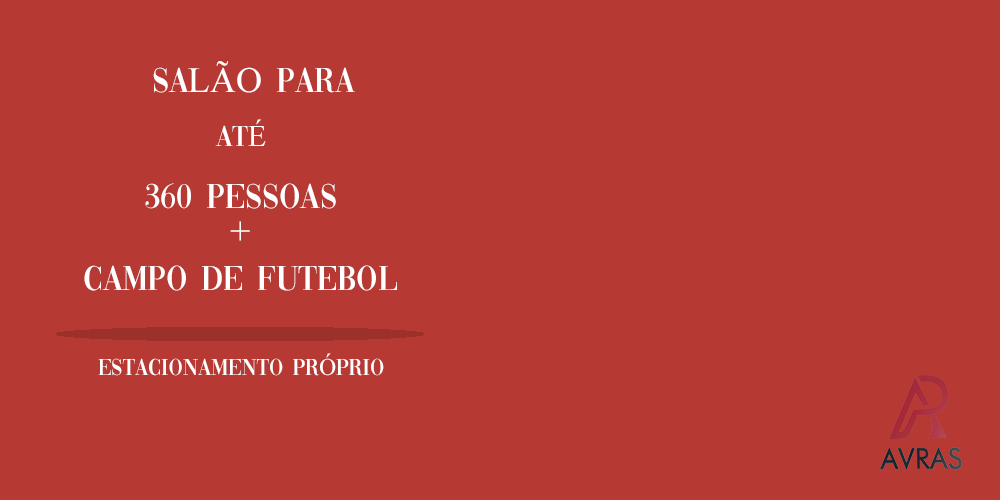
<style>
.page{position:relative;width:1000px;height:500px;background:#b63933}
.page>*{position:absolute;margin:0}
.t1{font:36px "Vogue-Regular";color:#ffffff}
.t2{font:36px "TimesNewRomanPSMT";color:#ffffff}
.t3{font:30px "Vogue-Regular";color:#ffffff}
.t4{font:30px "TimesNewRomanPSMT";color:#ffffff}
.t5{font:24px "Vogue-Regular";color:#ffffff}
.t6{font:24px "TimesNewRomanPSMT";color:#ffffff}
</style>
<div class="page">
<p class="t1" style="left:153px;top:61px;width:202px;height:32px">SA<span class="t2">LÃO</span> PARA</p>
<p class="t3" style="left:215px;top:119px;width:51px;height:27px">AT<span class="t4">É</span></p>
<p class="t1" style="left:145px;top:183px;width:191px;height:26px">360 PESSOAS</p>
<p class="t2" style="left:230px;top:221px;width:20px;height:20px">+</p>
<p class="t1" style="left:84px;top:265px;width:313px;height:26px">CAMPO DE FUTEBOL</p>
<p class="t5" style="left:98px;top:353px;width:286px;height:23px">ESTACIONAMENTO PR<span class="t6">Ó</span>PRIO</p>
</div>
